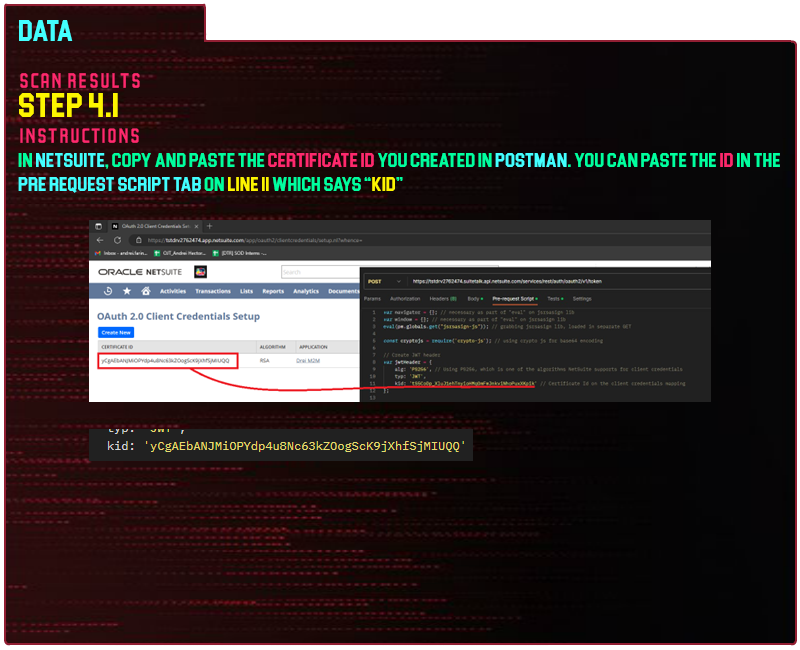
<style>
.page{position:relative;width:800px;height:650px}
.page>*{position:absolute;margin:0}
.t1{font:30px "Blockletter";color:#43ffff}
.t2{font:35px "Party-Lights-[WLM]-Flat";color:#ff296d}
.t3{font:35px "Blockletter";color:#fdf500}
.t4{font:20px "Blockletter";color:#43ffff}
.t5{font:20px "Blockletter";color:#00ff9f}
.t6{font:20px "Blockletter";color:#ff296d}
.t7{font:20px "Blockletter";color:#fc286c}
.t8{font:20px "Blockletter";color:#fdf500}
</style>
<div class="page">
<p class="t1" style="left:19px;top:20px;width:54px;height:21px">Data</p>
<p class="t2" style="left:20px;top:73px;width:120px;height:15px">Scan REsults</p>
<p class="t3" style="left:19px;top:93px;width:99px;height:24px">step 4.1</p>
<p class="t2" style="left:20px;top:128px;width:119px;height:15px">instructions</p>
<p class="t4" style="left:18px;top:153px;width:762px;height:40px"><span class="t5">in </span>netsuite<span class="t5">, copy and paste the </span><span class="t6">certificate id</span><span class="t5"> you created in </span>postman<span class="t5">. you can paste the </span><span class="t7">id </span><span class="t5">in the </span>pre request script tab <span class="t5">on </span><span class="t8">line 11 </span><span class="t5">which says “</span><span class="t8">kid</span><span class="t5">”</span></p>
</div>
